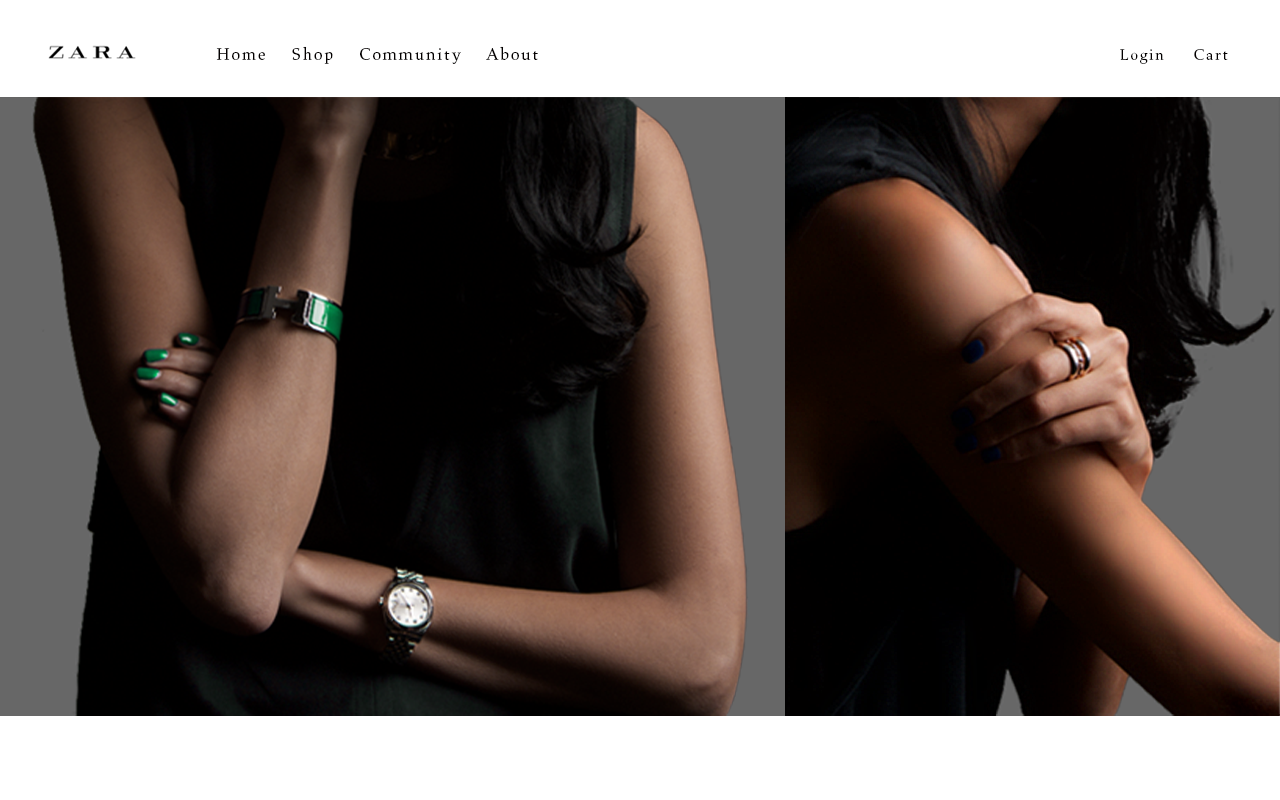
<style>
.page{position:relative;width:1280px;height:800px;background:#ffffff}
.page>*{position:absolute;margin:0}
.t1{font:17.3px "Aldus-Roman";letter-spacing:0.1em;color:#030000}
.t2{font:16px "Aldus-Roman";letter-spacing:0.1em;color:#030000}
</style>
<div class="page">
<p class="t1" style="left:216px;top:46px;width:322px;height:18px">Home    Shop    Community    About</p>
<p class="t2" style="left:1120px;top:49px;width:108px;height:15px">Login     Cart</p>
</div>
